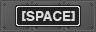
<style>
.page{position:relative;width:96px;height:32px;background:#212121}
.page>*{position:absolute;margin:0}
.t1{font:13.3px "Helvetica-Bold";color:#dadada}
</style>
<div class="page">
<p class="t1" style="left:22px;top:11px;width:53px;height:10px">[SPACE]</p>
</div>
